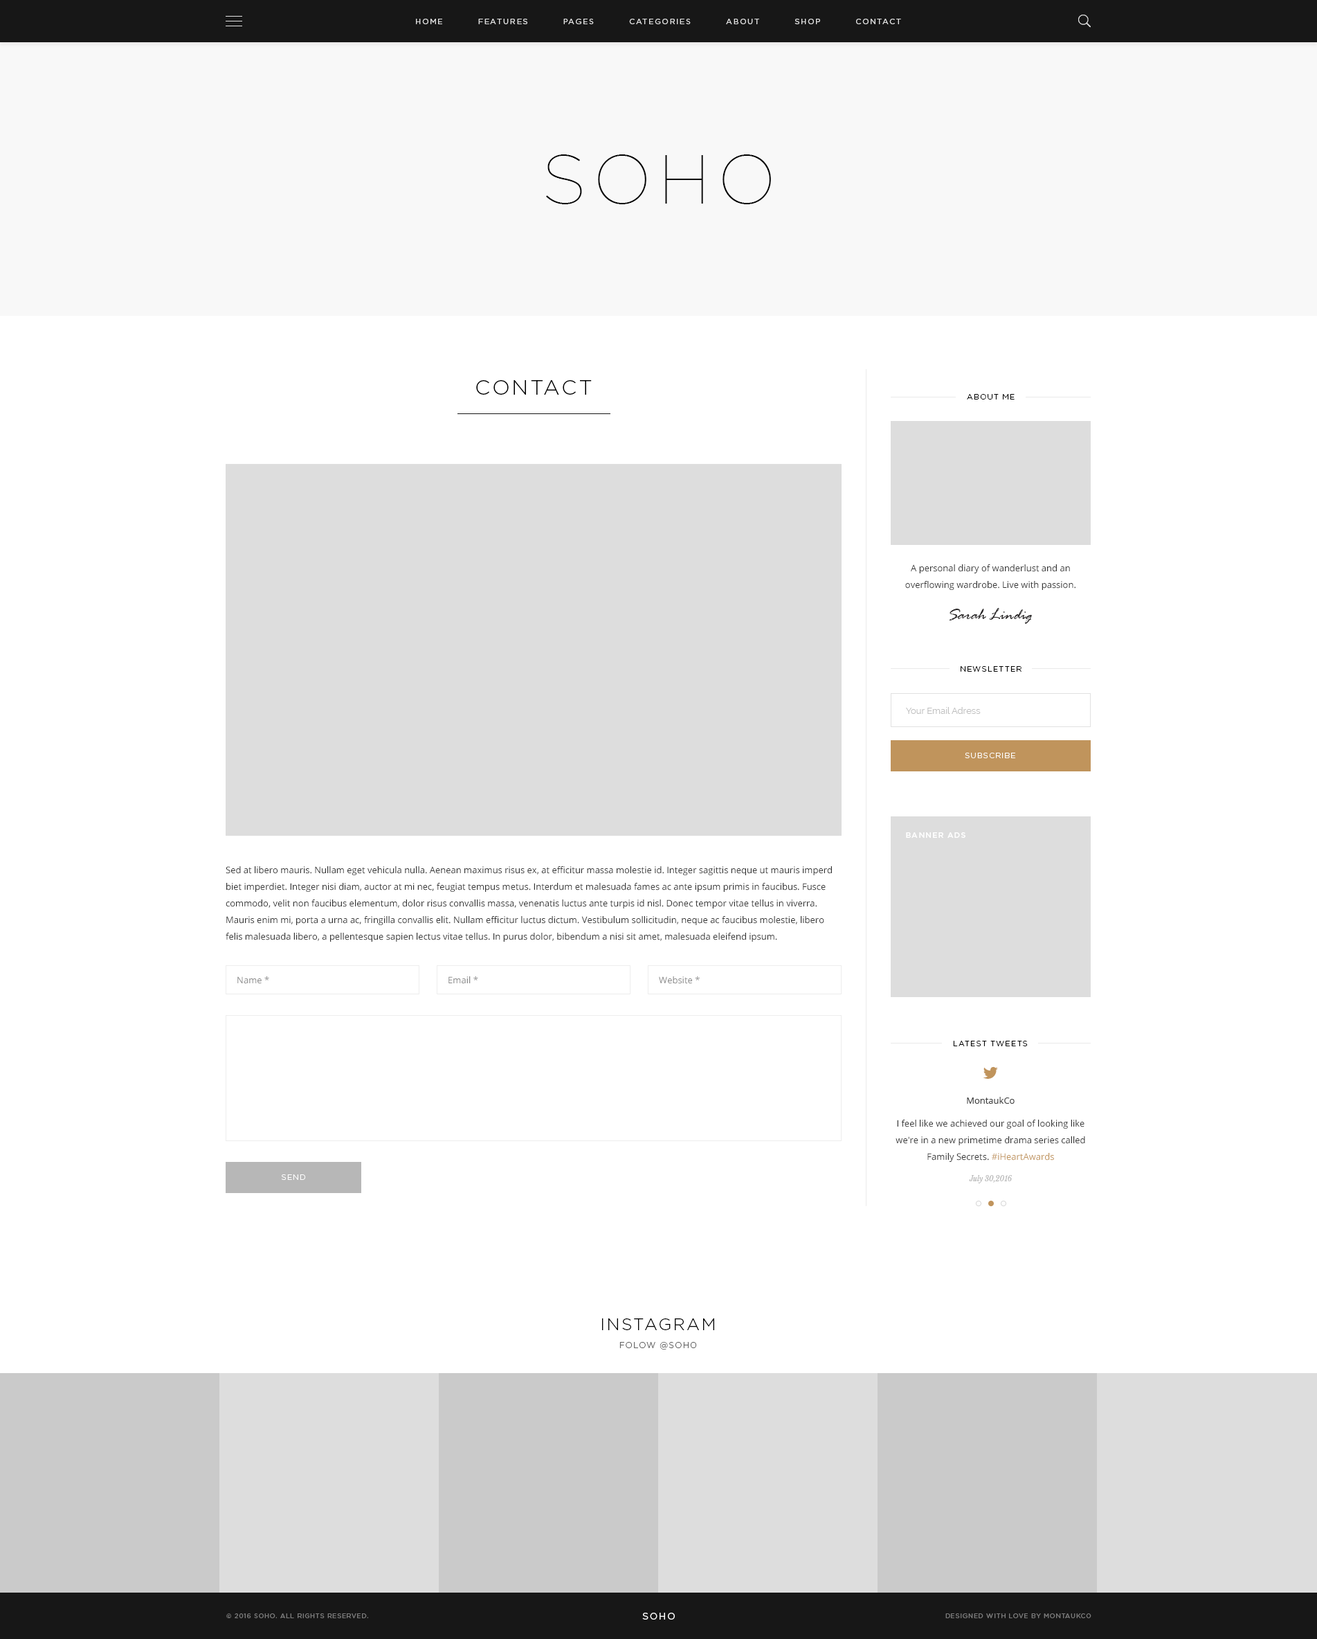
<style>
.page{position:relative;width:1317px;height:1639px;background:#ffffff}
.page>*{position:absolute;margin:0}
.t1{font:7.6px "GothamPro";letter-spacing:0.15em;color:#e4e4e4;text-transform:uppercase}
.t2{font:69.2px "GothamThin";letter-spacing:0.1em;color:#000000;text-transform:uppercase}
.t3{font:20.8px "GothamPro-Light";letter-spacing:0.1em;color:#000000;text-transform:uppercase}
.t4{font:7.6px "GothamPro-Light";letter-spacing:0.1em;color:#000000;text-transform:uppercase}
.t5{font:9px/16.6px "OpenSans";color:#343434}
.t6{font:16.6px "RageItalic";color:#262324}
.t7{font:9px "Raleway";color:#c0c0c0}
.t8{font:7.6px "GothamPro-Light";letter-spacing:0.1em;color:#ffffff;text-transform:uppercase}
.t9{font:7.6px "GothamPro-Medium";letter-spacing:0.1em;color:#ffffff;text-transform:uppercase}
.t10{font:9px "OpenSans";color:#898989}
.t11{font:9px "OpenSans";color:#404040}
.t12{font:9px/16.6px "OpenSans";color:#c0945c}
.t13{font:6.9px "LibreBaskerville-Italic";color:#b6b6b6}
.t14{font:8.3px/18px "GothamPro-Light";letter-spacing:0.1em;color:#626262;text-transform:uppercase}
.t15{font:16.6px/18px "GothamPro-Light";letter-spacing:0.1em;color:#000000;text-transform:uppercase}
.t16{font:6.2px "GothamPro";letter-spacing:0.1em;color:#7c7c7c;text-transform:uppercase}
.t17{font:9.7px "GothamPro";letter-spacing:0.1em;color:#ffffff;text-transform:uppercase}
.t18{font:6.2px "GothamPro";letter-spacing:0.1em;color:#7b7b7b;text-transform:uppercase}
</style>
<div class="page">
<p class="t1" style="left:416px;top:19px;width:485px;height:5px">Home          Features          pages          Categories          About          Shop          Contact</p>
<p class="t2" style="left:546px;top:154px;width:225px;height:50px">Soho</p>
<p class="t3" style="left:476px;top:380px;width:116px;height:15px">cONTACT</p>
<p class="t4" style="left:967px;top:394px;width:48px;height:5px">About Me</p>
<p class="t5" style="left:906px;top:564px;width:170px;height:26px;text-align:center">A personal diary of wanderlust and an <br>overflowing wardrobe. Live with passion.</p>
<p class="t6" style="left:949px;top:608px;width:83px;height:16px">Sarah Lindig</p>
<p class="t4" style="left:961px;top:666px;width:61px;height:6px">Newsletter</p>
<p class="t7" style="left:906px;top:707px;width:75px;height:7px">Your Email Adress</p>
<p class="t8" style="left:965px;top:753px;width:51px;height:5px">Subscribe</p>
<p class="t9" style="left:906px;top:832px;width:60px;height:6px">Banner Ads</p>
<p class="t5" style="left:226px;top:866px;width:606px;height:76px">Sed at libero mauris. Nullam eget vehicula nulla. Aenean maximus risus ex, at efficitur massa molestie id. Integer sagittis neque ut mauris imperd<br>biet imperdiet. Integer nisi diam, auctor at mi nec, feugiat tempus metus. Interdum et malesuada fames ac ante ipsum primis in faucibus. Fusce commodo, velit non faucibus elementum, dolor risus convallis massa, venenatis luctus ante turpis id nisl. Donec tempor vitae tellus in viverra. Mauris enim mi, porta a urna ac, fringilla convallis elit. Nullam efficitur luctus dictum. Vestibulum sollicitudin, neque ac faucibus molestie, libero felis malesuada libero, a pellentesque sapien lectus vitae tellus. In purus dolor, bibendum a nisi sit amet, malesuada eleifend ipsum.</p>
<p class="t10" style="left:237px;top:976px;width:32px;height:8px">Name *</p>
<p class="t10" style="left:449px;top:976px;width:29px;height:8px">Email *</p>
<p class="t10" style="left:659px;top:976px;width:41px;height:8px">Website *</p>
<p class="t4" style="left:953px;top:1041px;width:75px;height:5px">Latest Tweets</p>
<p class="t11" style="left:967px;top:1097px;width:48px;height:7px">MontaukCo</p>
<p class="t5" style="left:896px;top:1119px;width:190px;height:43px;text-align:center">I feel like we achieved our goal of looking like we're in a new primetime drama series called Family Secrets. <span class="t12">#iHeartAwards</span></p>
<p class="t8" style="left:282px;top:1174px;width:24px;height:6px">SEND</p>
<p class="t13" style="left:969px;top:1175px;width:44px;height:8px">July 30,2016</p>
<p class="t14" style="left:602px;top:1318px;width:112px;height:31px;text-align:center"><span class="t15">Instagram<br></span>folow @soho</p>
<p class="t16" style="left:226px;top:1613px;width:142px;height:5px">© 2016 SOHO. All rights reserved.</p>
<p class="t17" style="left:642px;top:1612px;width:33px;height:7px">Soho</p>
<p class="t18" style="left:946px;top:1613px;width:146px;height:5px">Designed with love by montaukco</p>
</div>
